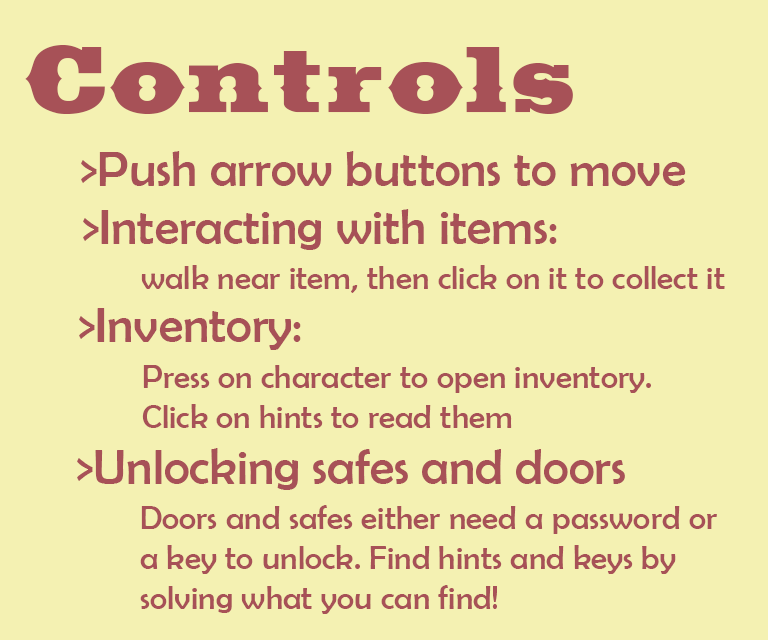
<style>
.page{position:relative;width:768px;height:640px;background:#f4f1b2}
.page>*{position:absolute;margin:0}
.t1{font:125px "Saddlebag-Black";color:#a75157}
.t2{font:50px "BerlinSansFB-Reg";color:#a75157}
.t3{font:33.3px "BerlinSansFB-Reg";color:#a75157}
</style>
<div class="page">
<p class="t1" style="left:25px;top:45px;width:548px;height:69px">Controls</p>
<p class="t2" style="left:81px;top:151px;width:605px;height:35px">&gt;Push arrow buttons to move</p>
<p class="t2" style="left:83px;top:209px;width:474px;height:41px">&gt;Interacting with items:</p>
<p class="t3" style="left:141px;top:265px;width:584px;height:28px">walk near item, then click on it to collect it</p>
<p class="t2" style="left:79px;top:308px;width:222px;height:42px">&gt;Inventory:</p>
<p class="t3" style="left:142px;top:365px;width:509px;height:63px">Press on character to open inventory.<br>Click on hints to read them</p>
<p class="t2" style="left:77px;top:448px;width:548px;height:42px">&gt;Unlocking safes and doors</p>
<p class="t3" style="left:140px;top:505px;width:577px;height:109px">Doors and safes either need a password or <br>a key to unlock. Find hints and keys by <br>solving what you can find!</p>
</div>
